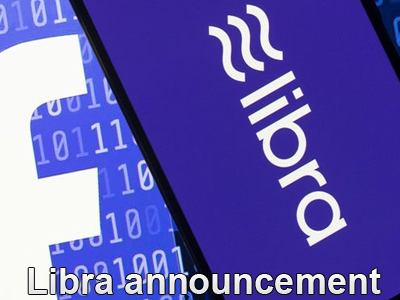
<style>
.page{position:relative;width:400px;height:300px}
.page>*{position:absolute;margin:0}
.t1{font:36px "Arial-BoldMT";color:#ededed}
</style>
<div class="page">
<p class="t1" style="left:28px;top:268px;width:353px;height:26px">Libra announcement</p>
</div>
